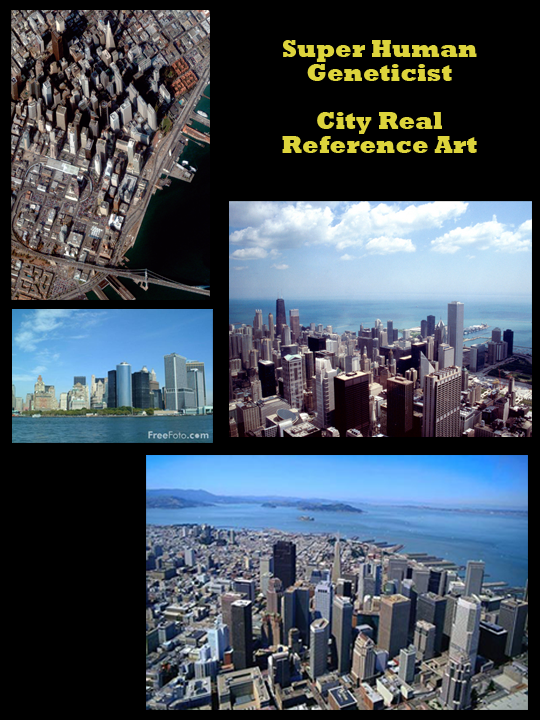
<style>
.page{position:relative;width:540px;height:720px;background:#000000}
.page>*{position:absolute;margin:0}
.t1{font:24px/24px "Rockwell-ExtraBold";color:#ddd43c}
</style>
<div class="page">
<p class="t1" style="left:282px;top:40px;width:195px;height:113px;text-align:center">Super Human<br>Geneticist<br><br>City Real<br>Reference Art</p>
</div>
